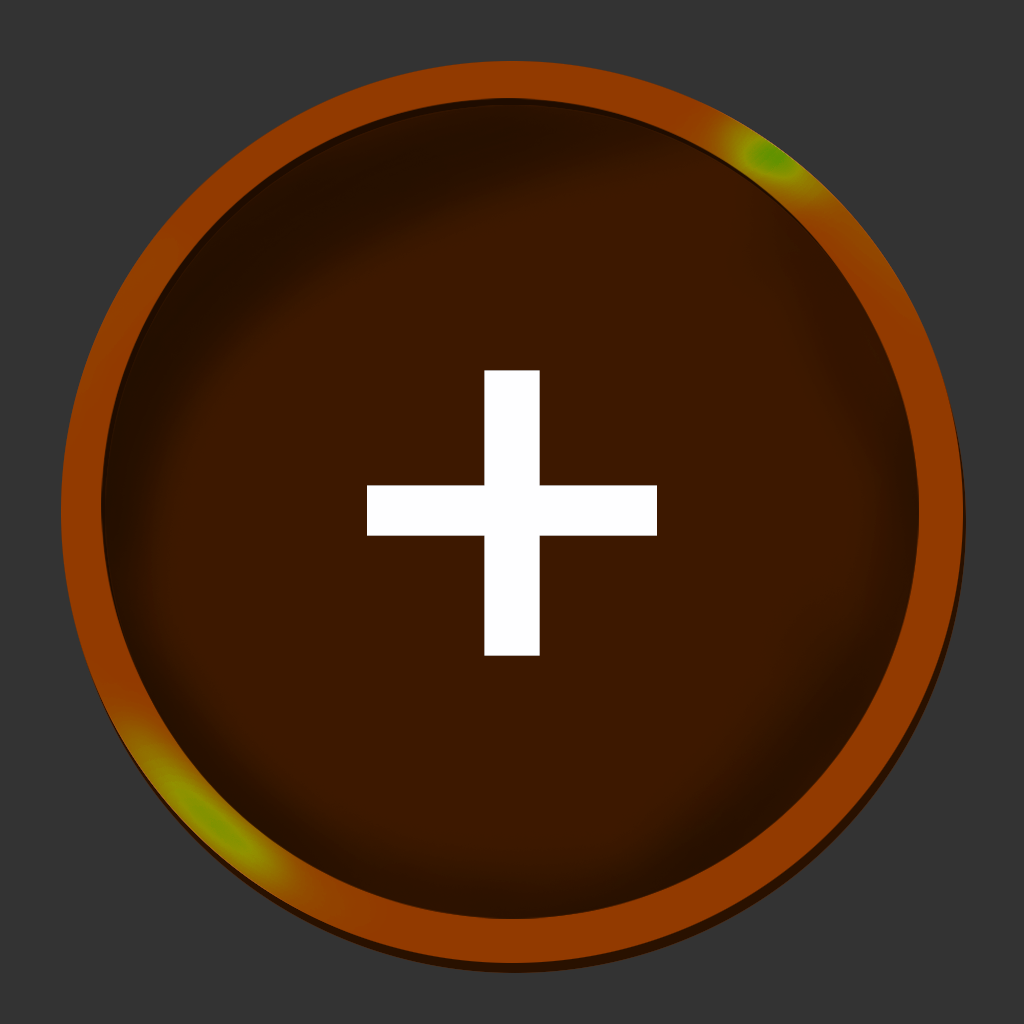
<style>
.page{position:relative;width:1024px;height:1024px;background:#333333}
.page>*{position:absolute;margin:0}
.t1{font:500px "PuradakGentleGothicR";color:#fefeff}
</style>
<div class="page">
<p class="t1" style="left:367px;top:370px;width:290px;height:286px">+</p>
</div>
